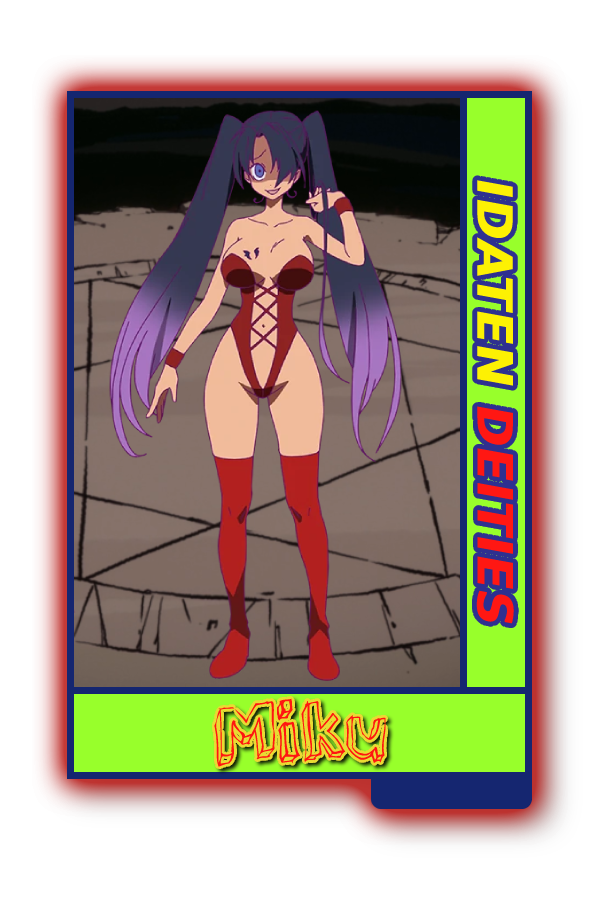
<style>
.page{position:relative;width:600px;height:900px;background:#ffffff}
.page>*{position:absolute;margin:0}
.t1{font:48.8px "MADETOMMY-Bold";color:#ff1713;font-weight:bold;font-style:italic}
.t2{font:48.8px "MADETOMMY-Bold";color:#fdf103;font-weight:bold;font-style:italic}
.t3{font:75px "3dumb";color:#ff1611}
</style>
<div class="page">
<p class="t1" style="left:476px;top:180px;width:38px;height:444px;rotate:90deg"><span class="t2">IDATEN </span>DEITIES</p>
<p class="t3" style="left:214px;top:698px;width:172px;height:69px">Miku</p>
</div>
